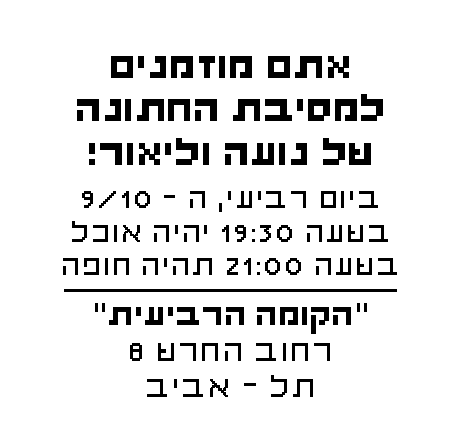
<style>
.page{position:relative;width:460px;height:442px;background:#ffffff}
.page>*{position:absolute;margin:0}
.t1{font:36px "StangerBold";color:#000000;font-weight:bold}
.t2{font:28px "Stanger";color:#000000;font-weight:bold}
.t3{font:30px "Stanger";color:#000000;font-weight:bold}
.t4{font:30px "StangerBold";color:#000000;font-weight:bold}
</style>
<div class="page">
<p class="t1" style="left:77px;top:56px;width:306px;height:109px;text-align:center">אתם מוזמנים <br>למסיבת החתונה <br>של נועה וליאור!</p>
<p class="t2" style="left:63px;top:191px;width:334px;height:84px;text-align:center">ביום רביעי, ה - 9/10<br>בשעה 19:30 יהיה אוכל<br>בשעה 21:00 תהיה חופה</p>
<p class="t3" style="left:95px;top:303px;width:272px;height:94px;text-align:center">"<span class="t4">הקומה הרביעית</span>"<br>רחוב החרש 8<br>תל - אביב</p>
</div>
